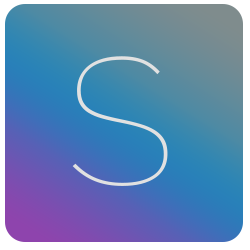
<style>
.page{position:relative;width:250px;height:250px}
.page>*{position:absolute;margin:0}
.t1{font:180px "Raleway-Thin";letter-spacing:0.1em;color:#e1e1e1}
</style>
<div class="page">
<p class="t1" style="left:72px;top:56px;width:96px;height:130px">S</p>
</div>
